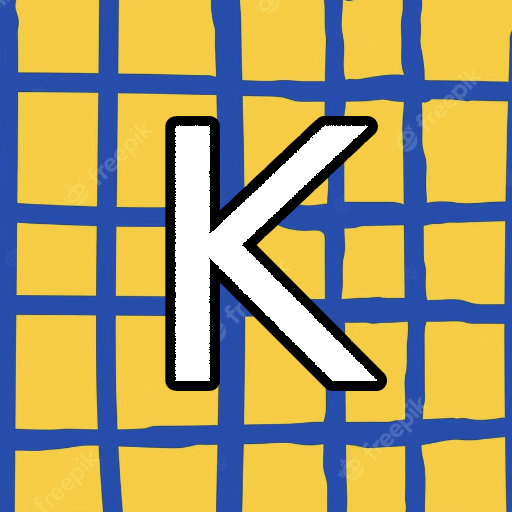
<style>
.page{position:relative;width:512px;height:512px;background:#f7cc45}
.page>*{position:absolute;margin:0}
.t1{font:350px "DejaVuSans";color:#ffffff}
</style>
<div class="page">
<p class="t1" style="left:175px;top:125px;width:203px;height:256px">K</p>
</div>
